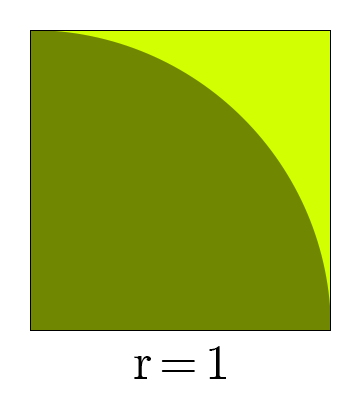
<style>
.page{position:relative;width:360px;height:400px;background:#6f8701}
.page>*{position:absolute;margin:0}
.t1{font:50px "CMUSerif-Roman";letter-spacing:-0.1em;color:#000000}
</style>
<div class="page">
<p class="t1" style="left:134px;top:346px;width:92px;height:33px">r = 1</p>
</div>
